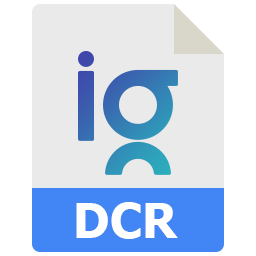
<style>
.page{position:relative;width:256px;height:256px;background:#eaeaea}
.page>*{position:absolute;margin:0}
.t1{font:48px "Tahoma-Bold";color:#ffffff}
</style>
<div class="page">
<p class="t1" style="left:76px;top:202px;width:102px;height:37px">DCR</p>
</div>
